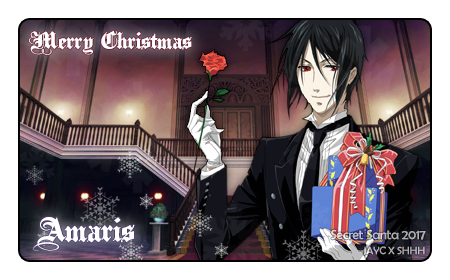
<style>
.page{position:relative;width:450px;height:280px;background:#ffffff}
.page>*{position:absolute;margin:0}
.t1{font:19.4px "PlainBlackWide-Normal";letter-spacing:-0.025em;color:#ffffff}
.t2{font:27.8px "PlainBlackWide-Normal";letter-spacing:-0.025em;color:#ffffff}
.t3{font:13.9px "BerlinSansFB-Reg";letter-spacing:-0.025em}
.t4{font:11.1px "BerlinSansFB-Reg";letter-spacing:-0.025em;color:#b0b0b3}
</style>
<div class="page">
<p class="t1" style="left:29px;top:30px;width:163px;height:25px">Merry Christmas</p>
<p class="t2" style="left:33px;top:217px;width:102px;height:34px">Amaris</p>
<p class="t3" style="left:331px;top:229px;width:95px;height:11px">Secret Santa 2017</p>
<p class="t4" style="left:363px;top:246px;width:62px;height:9px">JAYC X SHHH</p>
</div>
